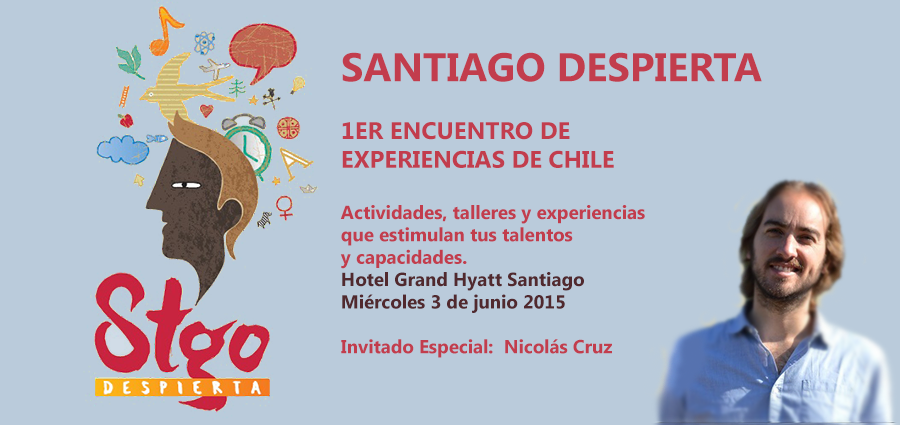
<style>
.page{position:relative;width:900px;height:425px;background:#bacbdb}
.page>*{position:absolute;margin:0}
.t1{font:18.7px "LaoUI-Bold";color:#c23d4d}
.t2{font:40px "LaoUI-Bold";color:#c23d4d}
.t3{font:24px "LaoUI-Bold";color:#c23d4d}
.t4{font:18.7px "LaoUI-Bold";color:#51292e}
</style>
<div class="page">
<p class="t1" style="left:340px;top:52px;width:422px;height:306px"><span class="t2">SANTIAGO DESPIERTA<br></span><span class="t3"><br>1ER ENCUENTRO DE <br>EXPERIENCIAS DE CHILE<br><br></span>Actividades, talleres y experiencias<br>que estimulan tus talentos <br>y capacidades.  <br><span class="t4">Hotel Grand Hyatt Santiago<br>Miércoles 3 de junio 2015<br><br></span>Invitado Especial:  Nicolás Cruz<br><br><span class="t3"><br>Inscripciones hasta cubrir máximo de cupos</span></p>
</div>
